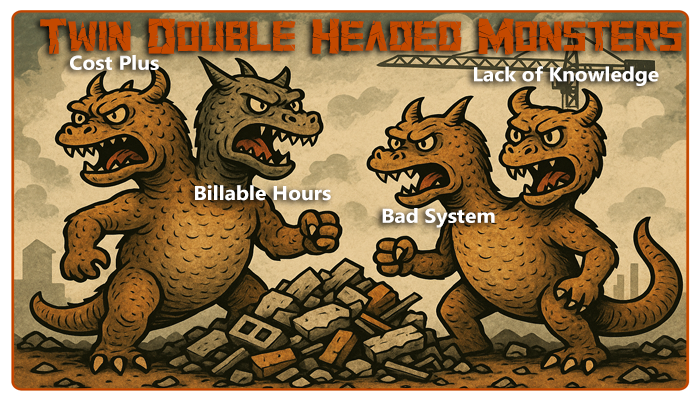
<style>
.page{position:relative;width:700px;height:400px}
.page>*{position:absolute;margin:0}
.t1{font:61.5px "CracksupDemoRegular";color:#c44900;scale:1.23 1}
.t2{font:20px "SegoeUI-Bold";color:#ffffff;scale:1.05 1}
</style>
<div class="page">
<p class="t1" style="left:40px;top:18px;width:642px;height:37px">Twin Double Headed Monsters</p>
<p class="t2" style="left:70px;top:55px;width:89px;height:15px">Cost Plus</p>
<p class="t2" style="left:474px;top:66px;width:185px;height:20px">Lack of Knowledge</p>
<p class="t2" style="left:195px;top:185px;width:136px;height:16px">Billable Hours</p>
<p class="t2" style="left:382px;top:208px;width:113px;height:20px">Bad System</p>
</div>
